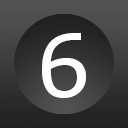
<style>
.page{position:relative;width:128px;height:128px}
.page>*{position:absolute;margin:0}
.t1{font:100px "Consolas";color:#ffffff}
</style>
<div class="page">
<p class="t1" style="left:42px;top:33px;width:44px;height:65px">6</p>
</div>
